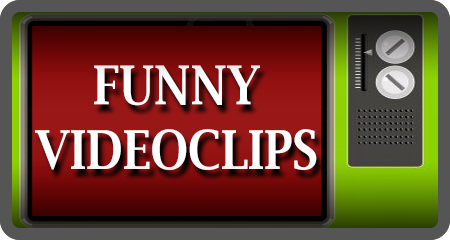
<style>
.page{position:relative;width:450px;height:240px}
.page>*{position:absolute;margin:0}
.t1{font:53.8px "LucidaBright-Demi";color:#ffffff;scale:0.86 1}
</style>
<div class="page">
<p class="t1" style="left:35px;top:65px;width:282px;height:105px;text-align:center">FUNNY<br>VIDEOCLIPS</p>
</div>
